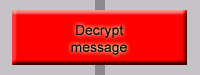
<style>
.page{position:relative;width:200px;height:75px;background:#ff0000}
.page>*{position:absolute;margin:0}
.t1{font:14px "ArialMT";color:#000000}
</style>
<div class="page">
<p class="t1" style="left:71px;top:25px;width:56px;height:30px;text-align:center">Decrypt<br>message</p>
</div>
